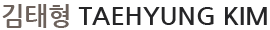
<style>
.page{position:relative;width:270px;height:30px;background:#ffffff}
.page>*{position:absolute;margin:0}
.t1{font:25px "NanumGothicBold";color:#252527}
.t2{font:25px "NanumGothicBold";color:#6d625c}
</style>
<div class="page">
<p class="t1" style="left:2px;top:4px;width:265px;height:24px"><span class="t2">김태형 </span>TAEHYUNG KIM</p>
</div>
